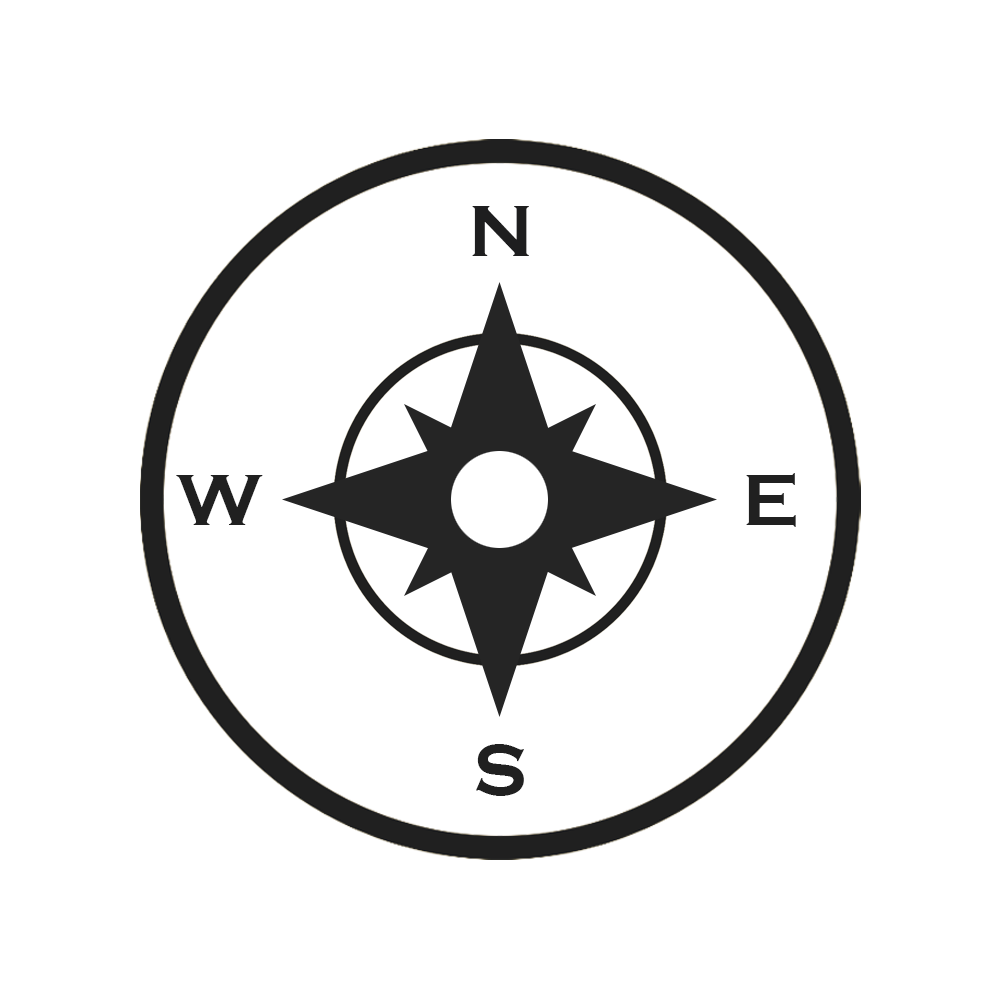
<style>
.page{position:relative;width:1000px;height:1000px;background:#ffffff}
.page>*{position:absolute;margin:0}
.t1{font:75px "CopperplateGothic-Bold";letter-spacing:0.075em;color:#1e1e1f}
.t2{font:75px "CopperplateGothic-Bold";letter-spacing:0.075em;color:#202020}
</style>
<div class="page">
<p class="t1" style="left:472px;top:206px;width:57px;height:50px">N</p>
<p class="t2" style="left:746px;top:473px;width:50px;height:54px">E</p>
<p class="t2" style="left:176px;top:475px;width:87px;height:50px">W</p>
<p class="t2" style="left:476px;top:744px;width:48px;height:52px">S</p>
</div>
